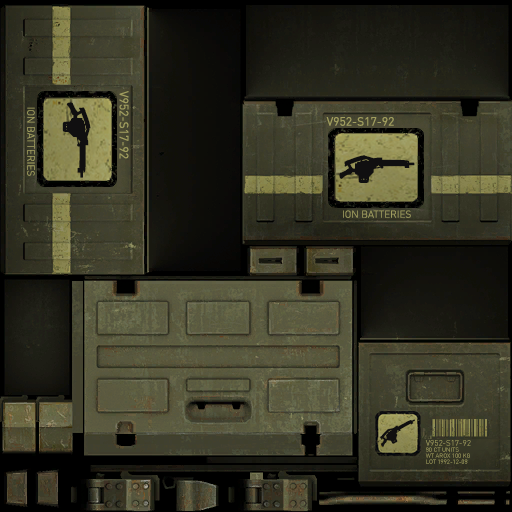
<style>
.page{position:relative;width:512px;height:512px}
.page>*{position:absolute;margin:0}
.t1{font:53.8px "Obsidianweaps";color:#100f10}
.t2{font:12px "DIN-Regular";color:#a09d5f}
.t3{font:10.2px "DIN-Light";color:#a09d5f}
.t4{font:54px "Obsidianweaps";color:#100f10}
.t5{font:10px "DIN-Light";color:#a09d5f}
.t6{font:30.1px "Obsidianweaps";color:#100f10}
.t7{font:8px "DIN-Regular";color:#a09d5f}
.t8{font:6px "DIN-Regular"}
.t9{font:6px "DIN-Regular";color:#a09d5f}
</style>
<div class="page">
<p class="t1" style="left:62px;top:102px;width:29px;height:76px;rotate:90deg">i</p>
<p class="t2" style="left:119px;top:91px;width:10px;height:68px;rotate:90deg">V952-S17-92</p>
<p class="t3" style="left:27px;top:107px;width:8px;height:69px;rotate:90deg">ION BATTERIES</p>
<p class="t2" style="left:326px;top:117px;width:68px;height:9px">V952-S17-92</p>
<p class="t4" style="left:339px;top:155px;width:76px;height:28px">i</p>
<p class="t5" style="left:343px;top:210px;width:68px;height:8px">ION BATTERIES</p>
<p class="t6" style="left:380px;top:419px;width:35px;height:28px;rotate:-29deg">i</p>
<p class="t7" style="left:425px;top:440px;width:46px;height:6px">V952-S17-92</p>
<p class="t8" style="left:426px;top:447px;width:33px;height:5px">80 CT UNITS</p>
<p class="t8" style="left:425px;top:453px;width:45px;height:5px">WT AROX 100 KG</p>
<p class="t9" style="left:426px;top:459px;width:42px;height:5px">LOT 1992-12-08</p>
</div>
